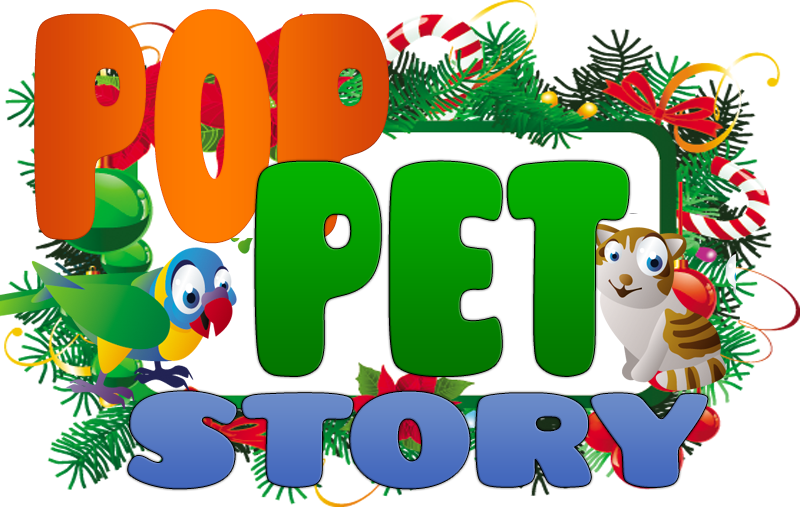
<style>
.page{position:relative;width:800px;height:507px;background:#ffffff}
.page>*{position:absolute;margin:0}
.t1{font:348.2px "Pusab";scale:0.48 1}
.t2{font:329.6px "Pusab";scale:0.57 1}
.t3{font:143.5px "Pusab";color:#587ac3;scale:1.2 1}
</style>
<div class="page">
<p class="t1" style="left:34px;top:9px;width:355px;height:235px">POP</p>
<p class="t2" style="left:255px;top:161px;width:374px;height:215px">PET</p>
<p class="t3" style="left:128px;top:391px;width:580px;height:98px">STORY</p>
</div>
